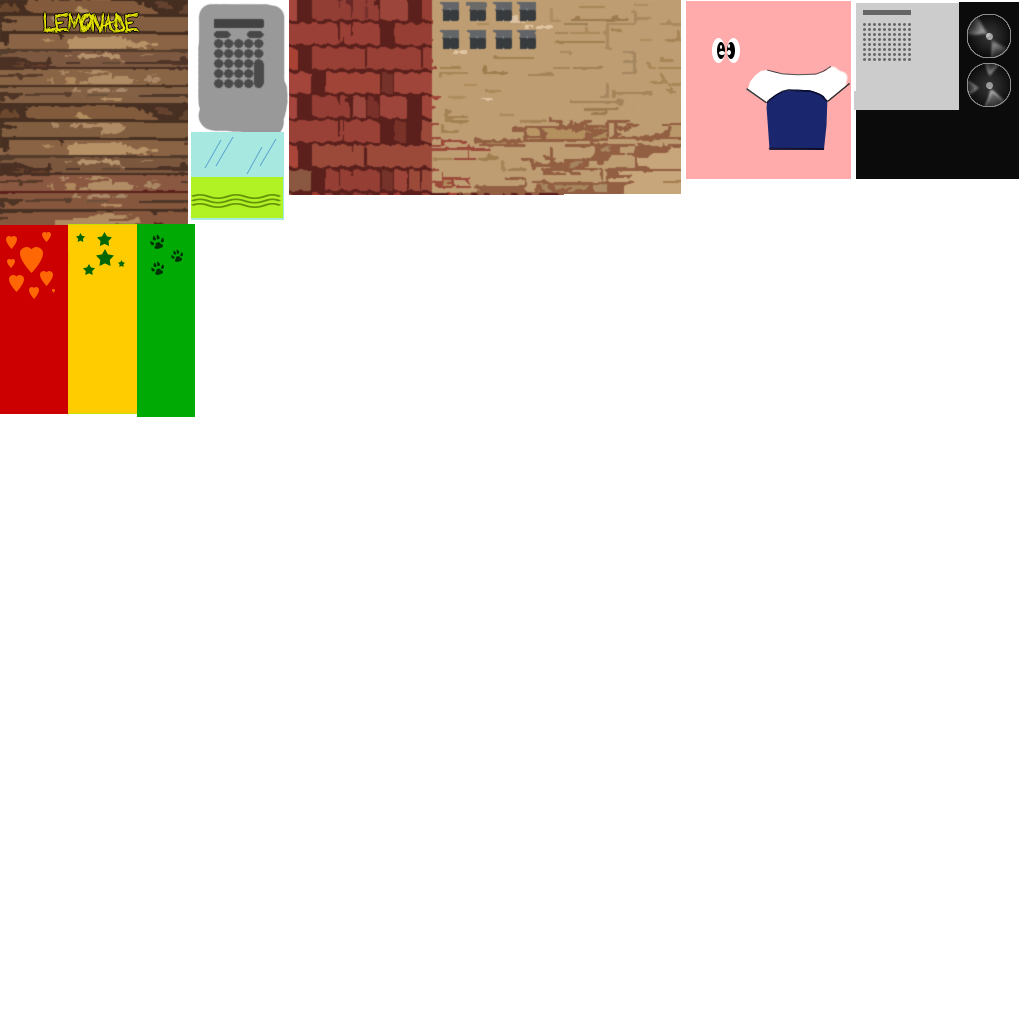
<style>
.page{position:relative;width:1024px;height:1024px;background:#ffffff}
.page>*{position:absolute;margin:0}
.t1{font:18px "Abstractpl";color:#e7e400;scale:0.73 1}
</style>
<div class="page">
<p class="t1" style="left:43px;top:12px;width:96px;height:21px">LEMONADE</p>
</div>
